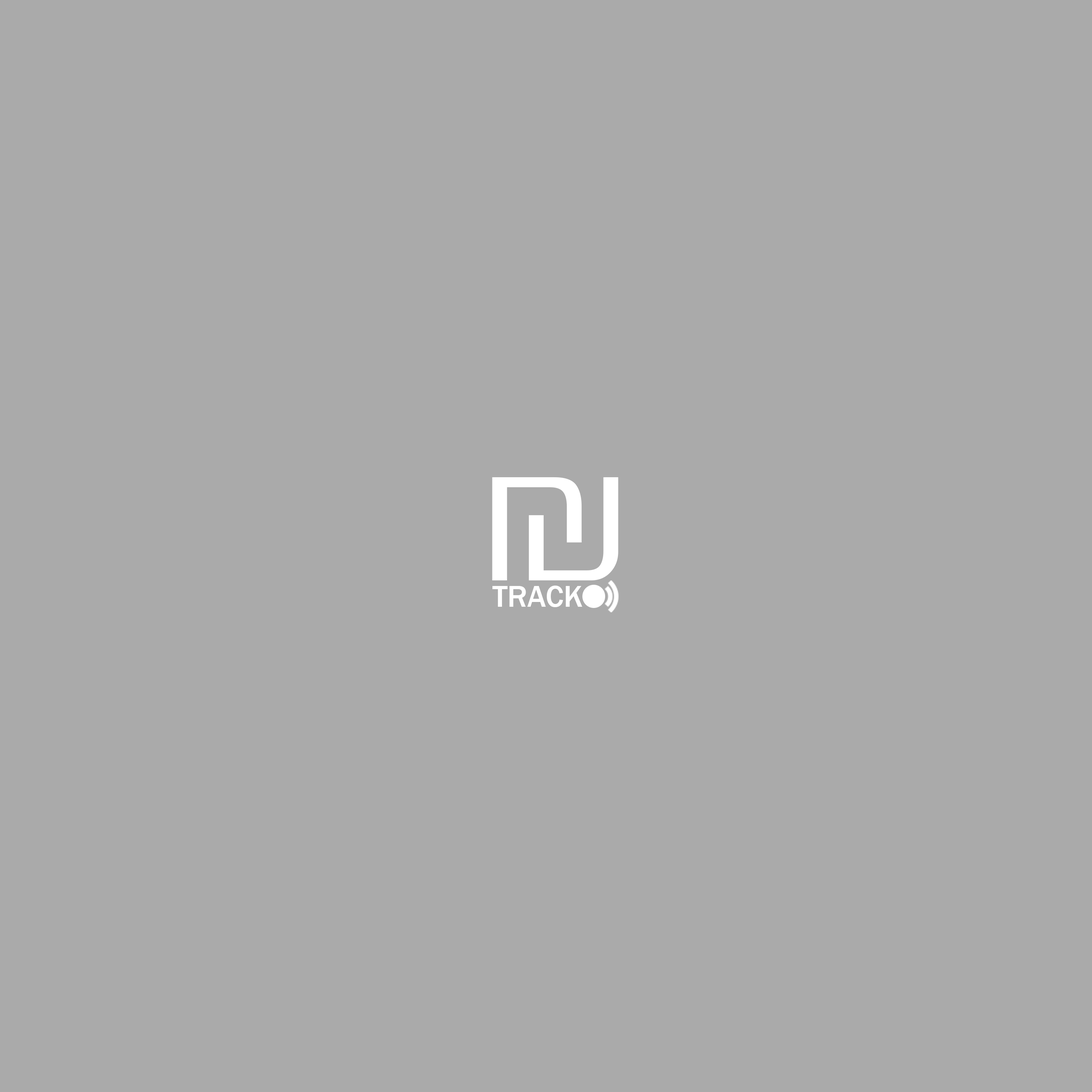
<style>
.page{position:relative;width:1092px;height:1092px;background:#aaaaaa}
.page>*{position:absolute;margin:0}
.t1{font:199.9px "TimesNewRomanPSMT";color:#ffffff}
.t2{font:31.2px "FranklinGothic-Medium";color:#ffffff}
</style>
<div class="page">
<p class="t1" style="left:492px;top:477px;width:126px;height:103px">₪</p>
<p class="t2" style="left:492px;top:586px;width:90px;height:21px">TRACK</p>
</div>
